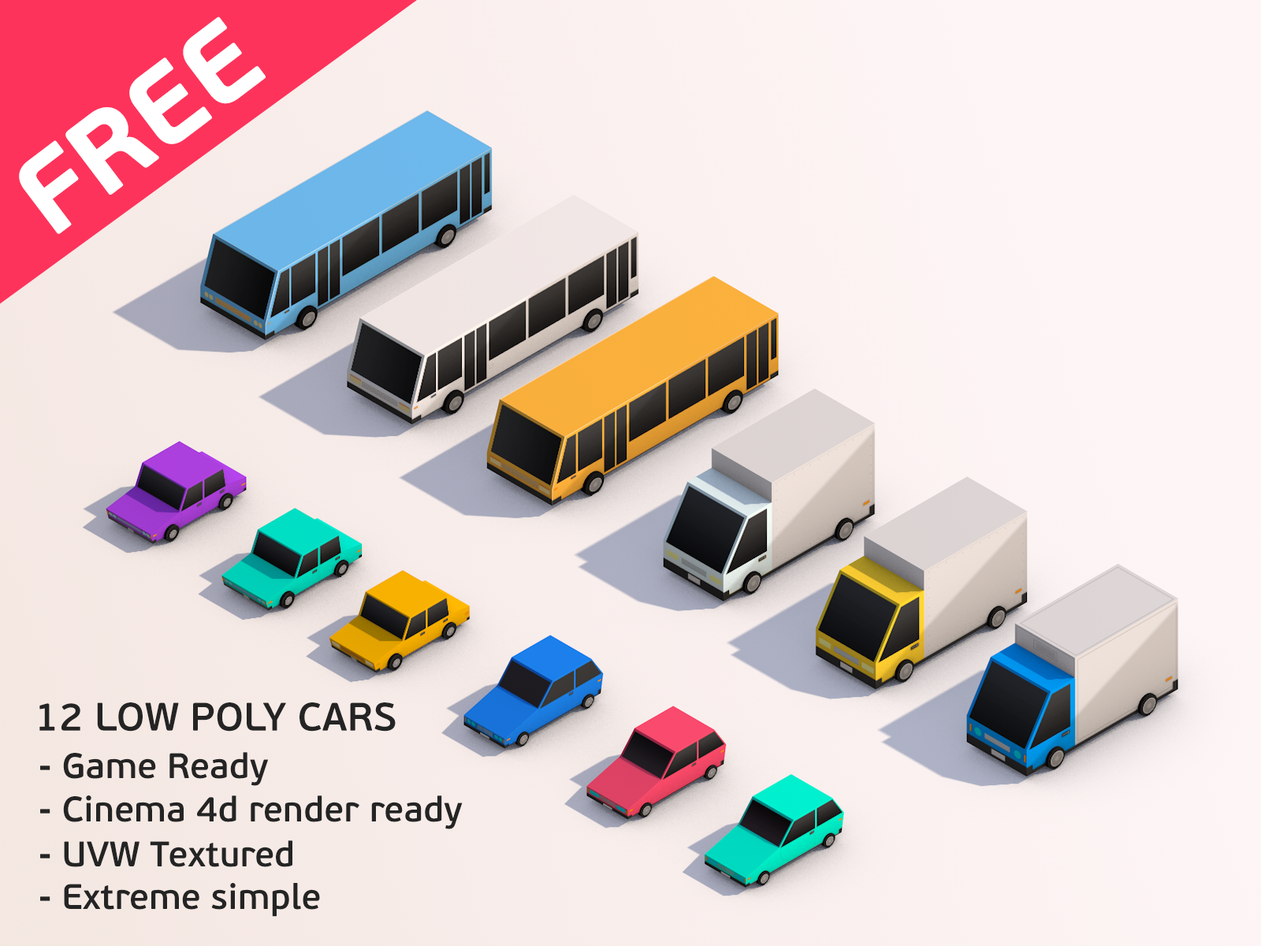
<style>
.page{position:relative;width:1261px;height:946px}
.page>*{position:absolute;margin:0}
.t1{font:109.8px "PFBeauSansPro-Bold";color:#ffffff}
.t2{font:39.7px "PFBeauSansPro-SemiBold";color:#242424;text-transform:uppercase}
.t3{font:35.5px "PFBeauSansPro-SemiBold";color:#242424}
</style>
<div class="page">
<p class="t1" style="left:19px;top:17px;width:247px;height:217px;rotate:-37deg">FREE</p>
<p class="t2" style="left:39px;top:702px;width:357px;height:29px">12 Low Poly cars</p>
<p class="t3" style="left:40px;top:752px;width:228px;height:34px">- Game Ready</p>
<p class="t3" style="left:40px;top:795px;width:423px;height:34px">- Cinema 4d render ready</p>
<p class="t3" style="left:40px;top:840px;width:252px;height:27px">- UVW Textured</p>
<p class="t3" style="left:40px;top:883px;width:280px;height:34px">- Extreme simple</p>
</div>
